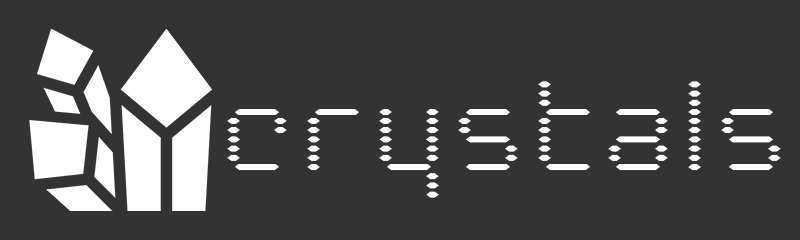
<style>
.page{position:relative;width:800px;height:240px;background:#333333}
.page>*{position:absolute;margin:0}
.t1{font:102.7px "BytePoliceTitle";letter-spacing:-0.1em;color:#ffffff}
</style>
<div class="page">
<p class="t1" style="left:227px;top:81px;width:554px;height:117px">Crystals</p>
</div>
